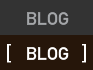
<style>
.page{position:relative;width:93px;height:70px;background:#333333}
.page>*{position:absolute;margin:0}
.t1{font:18px "DINMittelschriftStd";color:#a4a6a9}
.t2{font:22px "DINMittelschriftStd";color:#ffffff}
.t3{font:18px "DINMittelschriftStd";color:#ffffff}
</style>
<div class="page">
<p class="t1" style="left:27px;top:12px;width:42px;height:13px">BLOG</p>
<p class="t2" style="left:7px;top:44px;width:4px;height:19px">[</p>
<p class="t3" style="left:27px;top:47px;width:42px;height:13px">BLOG</p>
<p class="t2" style="left:82px;top:44px;width:4px;height:19px">]</p>
</div>
